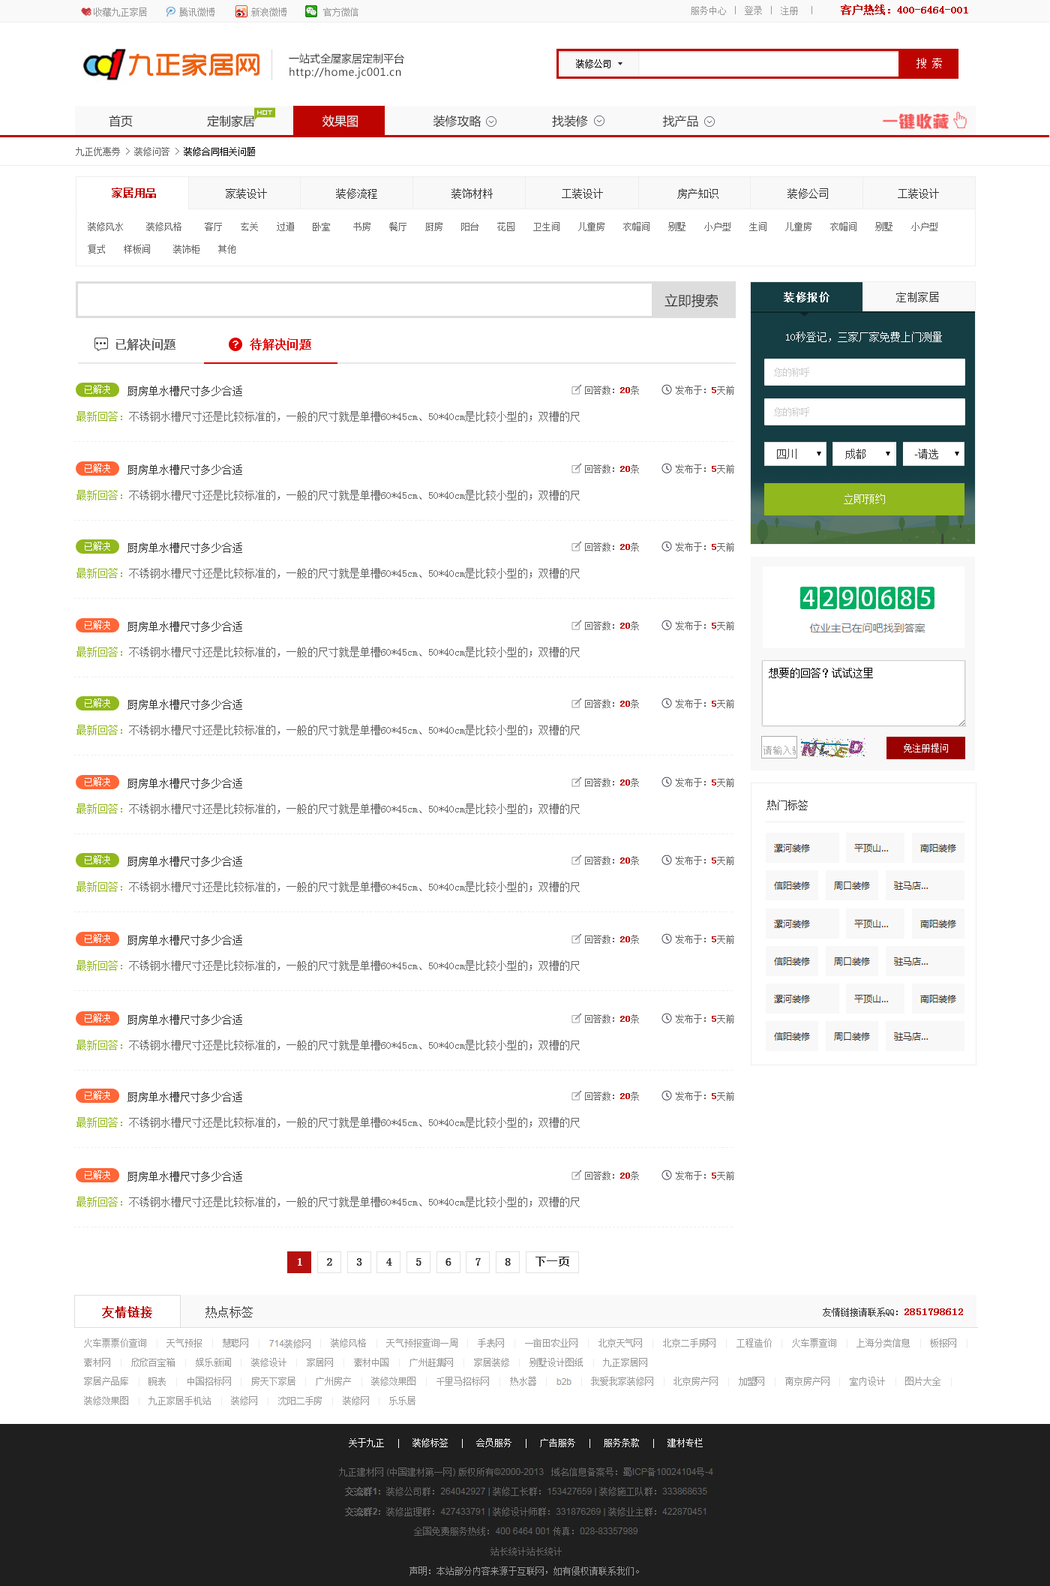
<style>
.page{position:relative;width:1050px;height:1586px;background:#ffffff}
.page>*{position:absolute;margin:0}
.t1{font:9px "NSimSun";color:#999999}
.t2{font:10.5px "NSimSun";color:#bd0400;font-weight:bold}
.t3{font:26px "TRENDS";color:#ee620d;font-weight:bold}
.t4{font:10.5px "MicrosoftYaHei";color:#333333}
.t5{font:9px "NSimSun";color:#000000}
.t6{font:10.5px "MicrosoftYaHei";letter-spacing:0.04em;color:#333333}
.t7{font:12px "MicrosoftYaHei";color:#333333}
.t8{font:12px "MicrosoftYaHei";color:#efefef}
.t9{font:9px "NSimSun";color:#666666}
.t10{font:10.5px "NSimSun";color:#333333}
.t11{font:9px/22.5px "NSimSun";color:#666666}
.t12{font:13.5px "MicrosoftYaHei";color:#333333}
.t13{font:10.5px "NSimSun";letter-spacing:0.05em;color:#ffffff;font-weight:bold}
.t14{font:10.5px "NSimSun";letter-spacing:0.05em;color:#333333}
.t15{font:10.5px "NSimSun";color:#ffffff}
.t16{font:9px "NSimSun";color:#cccccc}
.t17{font:9px "NSimSun";color:#ffffff}
.t18{font:9px "NSimSun";color:#bd0400;font-weight:bold}
.t19{font:10.5px "NSimSun";color:#666666}
.t20{font:10.5px "NSimSun";color:#91b81d}
.t21{font:4.5px "NSimSun";letter-spacing:0.4em;color:#eeeeee}
.t22{font:10.5px "NSimSun";color:#000000}
.t23{font:12px "NSimSun";color:#bd0400;font-weight:bold}
.t24{font:12px "NSimSun";color:#333333}
.t25{font:9px "NSimSun";color:#333333}
</style>
<div class="page">
<p class="t1" style="left:691px;top:4px;width:277px;height:11px">服务中心 ｜ 登录 ｜ 注册  ｜     <span class="t2">客户热线：400-6464-001</span></p>
<p class="t1" style="left:94px;top:8px;width:264px;height:8px">收藏九正家居       腾讯微博        新浪微博        官方微信</p>
<p class="t3" style="left:129px;top:53px;width:131px;height:23px">九正家居网</p>
<p class="t4" style="left:289px;top:53px;width:115px;height:11px">一站式全屋家居定制平台</p>
<p class="t5" style="left:576px;top:59px;width:34px;height:9px">装修公司</p>
<p class="t6" style="left:290px;top:67px;width:111px;height:12px">http://home.jc001.cn</p>
<p class="t7" style="left:109px;top:115px;width:24px;height:13px">首页</p>
<p class="t7" style="left:207px;top:115px;width:491px;height:13px">定制家居                  <span class="t8"> 效果图</span>                     装修攻略                    找装修                     找产品</p>
<p class="t9" style="left:76px;top:147px;width:179px;height:9px">九正优惠券 &gt; 装修问答 &gt;<span class="t5"> 装修合同相关问题</span></p>
<p class="t2" style="left:112px;top:188px;width:44px;height:10px">家居用品</p>
<p class="t10" style="left:226px;top:188px;width:713px;height:11px">家装设计             装修流程              装饰材料             工装设计              房产知识             装修公司             工装设计</p>
<p class="t11" style="left:88px;top:222px;width:850px;height:32px">装修风水     装修风格     客厅    玄关    过道    卧室     书房    餐厅    厨房    阳台    花园    卫生间    儿童房    衣帽间    别墅    小户型    生间    儿童房    衣帽间    别墅    小户型 <br>复式    样板间     装饰柜    其他</p>
<p class="t12" style="left:664px;top:293px;width:54px;height:15px">立即搜索</p>
<p class="t13" style="left:784px;top:292px;width:46px;height:10px">装修报价</p>
<p class="t14" style="left:896px;top:292px;width:43px;height:10px">定制家居</p>
<p class="t15" style="left:786px;top:332px;width:156px;height:10px">10秒登记，三家厂家免费上门测量</p>
<p class="t16" style="left:774px;top:368px;width:35px;height:8px">您的称呼</p>
<p class="t17" style="left:85px;top:385px;width:25px;height:9px">已解决</p>
<p class="t10" style="left:128px;top:386px;width:114px;height:10px">厨房单水槽尺寸多少合适</p>
<p class="t9" style="left:585px;top:386px;width:149px;height:8px">回答数：<span class="t18">20</span>条        发布于：<span class="t18">5</span>天前</p>
<p class="t19" style="left:76px;top:411px;width:504px;height:11px"><span class="t20">最新回答：</span>不锈钢水槽尺寸还是比较标准的，一般的尺寸就是单槽60*45cm、50*40cm是比较小型的；双槽的尺</p>
<p class="t16" style="left:774px;top:407px;width:35px;height:9px">您的称呼</p>
<p class="t21" style="left:74px;top:441px;width:659px;height:1px">-------------------------------------------------------------------------------------------------------------------------------------------------------------------</p>
<p class="t17" style="left:85px;top:464px;width:25px;height:8px">已解决</p>
<p class="t10" style="left:128px;top:464px;width:114px;height:11px">厨房单水槽尺寸多少合适</p>
<p class="t9" style="left:585px;top:464px;width:149px;height:9px">回答数：<span class="t18">20</span>条        发布于：<span class="t18">5</span>天前</p>
<p class="t19" style="left:76px;top:490px;width:504px;height:10px"><span class="t20">最新回答：</span>不锈钢水槽尺寸还是比较标准的，一般的尺寸就是单槽60*45cm、50*40cm是比较小型的；双槽的尺</p>
<p class="t15" style="left:844px;top:494px;width:41px;height:10px">立即预约</p>
<p class="t21" style="left:74px;top:520px;width:659px;height:0px">-------------------------------------------------------------------------------------------------------------------------------------------------------------------</p>
<p class="t17" style="left:85px;top:542px;width:25px;height:8px">已解决</p>
<p class="t10" style="left:128px;top:542px;width:114px;height:11px">厨房单水槽尺寸多少合适</p>
<p class="t9" style="left:585px;top:542px;width:149px;height:9px">回答数：<span class="t18">20</span>条        发布于：<span class="t18">5</span>天前</p>
<p class="t19" style="left:76px;top:568px;width:504px;height:10px"><span class="t20">最新回答：</span>不锈钢水槽尺寸还是比较标准的，一般的尺寸就是单槽60*45cm、50*40cm是比较小型的；双槽的尺</p>
<p class="t21" style="left:74px;top:598px;width:659px;height:0px">-------------------------------------------------------------------------------------------------------------------------------------------------------------------</p>
<p class="t17" style="left:85px;top:620px;width:25px;height:9px">已解决</p>
<p class="t10" style="left:128px;top:621px;width:114px;height:11px">厨房单水槽尺寸多少合适</p>
<p class="t9" style="left:585px;top:621px;width:149px;height:9px">回答数：<span class="t18">20</span>条        发布于：<span class="t18">5</span>天前</p>
<p class="t19" style="left:76px;top:646px;width:504px;height:11px"><span class="t20">最新回答：</span>不锈钢水槽尺寸还是比较标准的，一般的尺寸就是单槽60*45cm、50*40cm是比较小型的；双槽的尺</p>
<p class="t21" style="left:74px;top:676px;width:659px;height:1px">-------------------------------------------------------------------------------------------------------------------------------------------------------------------</p>
<p class="t22" style="left:769px;top:668px;width:104px;height:10px">想要的回答？试试这里</p>
<p class="t17" style="left:85px;top:698px;width:25px;height:9px">已解决</p>
<p class="t10" style="left:128px;top:699px;width:114px;height:11px">厨房单水槽尺寸多少合适</p>
<p class="t9" style="left:585px;top:699px;width:149px;height:9px">回答数：<span class="t18">20</span>条        发布于：<span class="t18">5</span>天前</p>
<p class="t19" style="left:76px;top:724px;width:504px;height:11px"><span class="t20">最新回答：</span>不锈钢水槽尺寸还是比较标准的，一般的尺寸就是单槽60*45cm、50*40cm是比较小型的；双槽的尺</p>
<p class="t17" style="left:904px;top:743px;width:44px;height:9px">免注册提问</p>
<p class="t21" style="left:74px;top:754px;width:659px;height:1px">-------------------------------------------------------------------------------------------------------------------------------------------------------------------</p>
<p class="t17" style="left:85px;top:777px;width:25px;height:9px">已解决</p>
<p class="t10" style="left:128px;top:778px;width:114px;height:10px">厨房单水槽尺寸多少合适</p>
<p class="t9" style="left:585px;top:778px;width:149px;height:9px">回答数：<span class="t18">20</span>条        发布于：<span class="t18">5</span>天前</p>
<p class="t19" style="left:76px;top:803px;width:504px;height:11px"><span class="t20">最新回答：</span>不锈钢水槽尺寸还是比较标准的，一般的尺寸就是单槽60*45cm、50*40cm是比较小型的；双槽的尺</p>
<p class="t10" style="left:766px;top:800px;width:42px;height:10px">热门标签</p>
<p class="t21" style="left:74px;top:833px;width:659px;height:1px">-------------------------------------------------------------------------------------------------------------------------------------------------------------------</p>
<p class="t17" style="left:85px;top:855px;width:25px;height:9px">已解决</p>
<p class="t10" style="left:128px;top:856px;width:114px;height:10px">厨房单水槽尺寸多少合适</p>
<p class="t9" style="left:585px;top:856px;width:149px;height:9px">回答数：<span class="t18">20</span>条        发布于：<span class="t18">5</span>天前</p>
<p class="t19" style="left:76px;top:881px;width:504px;height:11px"><span class="t20">最新回答：</span>不锈钢水槽尺寸还是比较标准的，一般的尺寸就是单槽60*45cm、50*40cm是比较小型的；双槽的尺</p>
<p class="t21" style="left:74px;top:911px;width:659px;height:1px">-------------------------------------------------------------------------------------------------------------------------------------------------------------------</p>
<p class="t17" style="left:85px;top:934px;width:25px;height:9px">已解决</p>
<p class="t10" style="left:128px;top:934px;width:114px;height:11px">厨房单水槽尺寸多少合适</p>
<p class="t9" style="left:585px;top:934px;width:149px;height:10px">回答数：<span class="t18">20</span>条        发布于：<span class="t18">5</span>天前</p>
<p class="t19" style="left:76px;top:960px;width:504px;height:10px"><span class="t20">最新回答：</span>不锈钢水槽尺寸还是比较标准的，一般的尺寸就是单槽60*45cm、50*40cm是比较小型的；双槽的尺</p>
<p class="t21" style="left:74px;top:990px;width:659px;height:1px">-------------------------------------------------------------------------------------------------------------------------------------------------------------------</p>
<p class="t17" style="left:85px;top:1013px;width:25px;height:9px">已解决</p>
<p class="t10" style="left:128px;top:1014px;width:114px;height:10px">厨房单水槽尺寸多少合适</p>
<p class="t9" style="left:585px;top:1014px;width:149px;height:9px">回答数：<span class="t18">20</span>条        发布于：<span class="t18">5</span>天前</p>
<p class="t19" style="left:76px;top:1040px;width:504px;height:10px"><span class="t20">最新回答：</span>不锈钢水槽尺寸还是比较标准的，一般的尺寸就是单槽60*45cm、50*40cm是比较小型的；双槽的尺</p>
<p class="t21" style="left:74px;top:1070px;width:659px;height:0px">-------------------------------------------------------------------------------------------------------------------------------------------------------------------</p>
<p class="t17" style="left:85px;top:1090px;width:25px;height:10px">已解决</p>
<p class="t10" style="left:128px;top:1091px;width:114px;height:11px">厨房单水槽尺寸多少合适</p>
<p class="t9" style="left:585px;top:1091px;width:149px;height:9px">回答数：<span class="t18">20</span>条        发布于：<span class="t18">5</span>天前</p>
<p class="t19" style="left:76px;top:1117px;width:504px;height:10px"><span class="t20">最新回答：</span>不锈钢水槽尺寸还是比较标准的，一般的尺寸就是单槽60*45cm、50*40cm是比较小型的；双槽的尺</p>
<p class="t21" style="left:74px;top:1147px;width:659px;height:1px">-------------------------------------------------------------------------------------------------------------------------------------------------------------------</p>
<p class="t17" style="left:85px;top:1170px;width:25px;height:9px">已解决</p>
<p class="t10" style="left:128px;top:1171px;width:114px;height:10px">厨房单水槽尺寸多少合适</p>
<p class="t9" style="left:585px;top:1171px;width:149px;height:9px">回答数：<span class="t18">20</span>条        发布于：<span class="t18">5</span>天前</p>
<p class="t19" style="left:76px;top:1196px;width:504px;height:11px"><span class="t20">最新回答：</span>不锈钢水槽尺寸还是比较标准的，一般的尺寸就是单槽60*45cm、50*40cm是比较小型的；双槽的尺</p>
<p class="t21" style="left:74px;top:1226px;width:659px;height:1px">-------------------------------------------------------------------------------------------------------------------------------------------------------------------</p>
<p class="t23" style="left:102px;top:1306px;width:50px;height:12px">友情链接</p>
<p class="t24" style="left:206px;top:1306px;width:47px;height:12px">热点标签</p>
<p class="t25" style="left:823px;top:1307px;width:140px;height:9px">友情链接请联系QQ：<span class="t2">2851798612</span></p>
</div>
